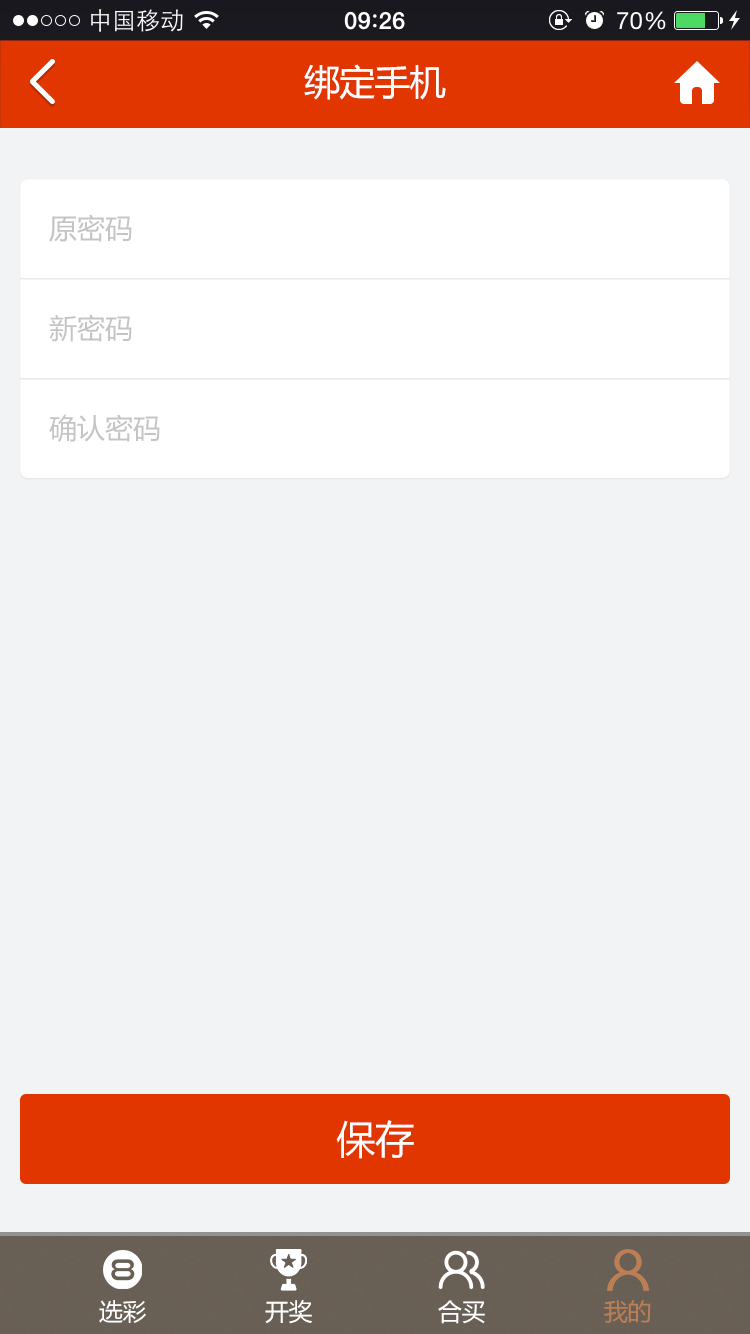
<style>
.page{position:relative;width:750px;height:1334px;background:#f2f3f5}
.page>*{position:absolute;margin:0}
.t1{font:36px "MicrosoftYaHei";letter-spacing:-0.025em;color:#ffffff}
.t2{font:28px "MicrosoftYaHei";color:#c4c4c4}
.t3{font:39px "MicrosoftYaHei";color:#ffffff}
.t4{font:24px "MicrosoftYaHei";letter-spacing:-0.025em;color:#ffffff}
.t5{font:24px "MicrosoftYaHei";letter-spacing:-0.025em;color:#bc7e53}
</style>
<div class="page">
<p class="t1" style="left:304px;top:64px;width:142px;height:36px">绑定手机</p>
<p class="t2" style="left:49px;top:214px;width:83px;height:28px">原密码</p>
<p class="t2" style="left:49px;top:314px;width:83px;height:28px">新密码</p>
<p class="t2" style="left:49px;top:414px;width:111px;height:28px">确认密码</p>
<p class="t3" style="left:336px;top:1120px;width:78px;height:39px">保存</p>
<p class="t4" style="left:99px;top:1300px;width:47px;height:23px">选彩</p>
<p class="t4" style="left:265px;top:1300px;width:48px;height:24px">开奖</p>
<p class="t4" style="left:438px;top:1300px;width:47px;height:24px">合买</p>
<p class="t5" style="left:604px;top:1300px;width:47px;height:23px">我的</p>
</div>
